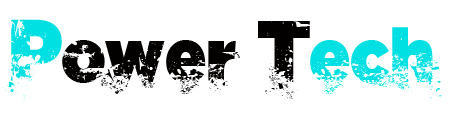
<style>
.page{position:relative;width:450px;height:120px;background:#ffffff}
.page>*{position:absolute;margin:0}
.t1{font:81.1px "C.A.Gatintas";color:#00e0e2}
.t2{font:81.1px "C.A.Gatintas";color:#030000}
.t3{font:69.5px "C.A.Gatintas";color:#00e0e2}
.t4{font:69.5px "C.A.Gatintas";color:#030000}
</style>
<div class="page">
<p class="t1" style="left:2px;top:19px;width:60px;height:81px">P</p>
<p class="t2" style="left:258px;top:21px;width:52px;height:78px">T</p>
<p class="t3" style="left:310px;top:27px;width:133px;height:73px">ech</p>
<p class="t4" style="left:62px;top:40px;width:178px;height:54px">ower</p>
</div>
